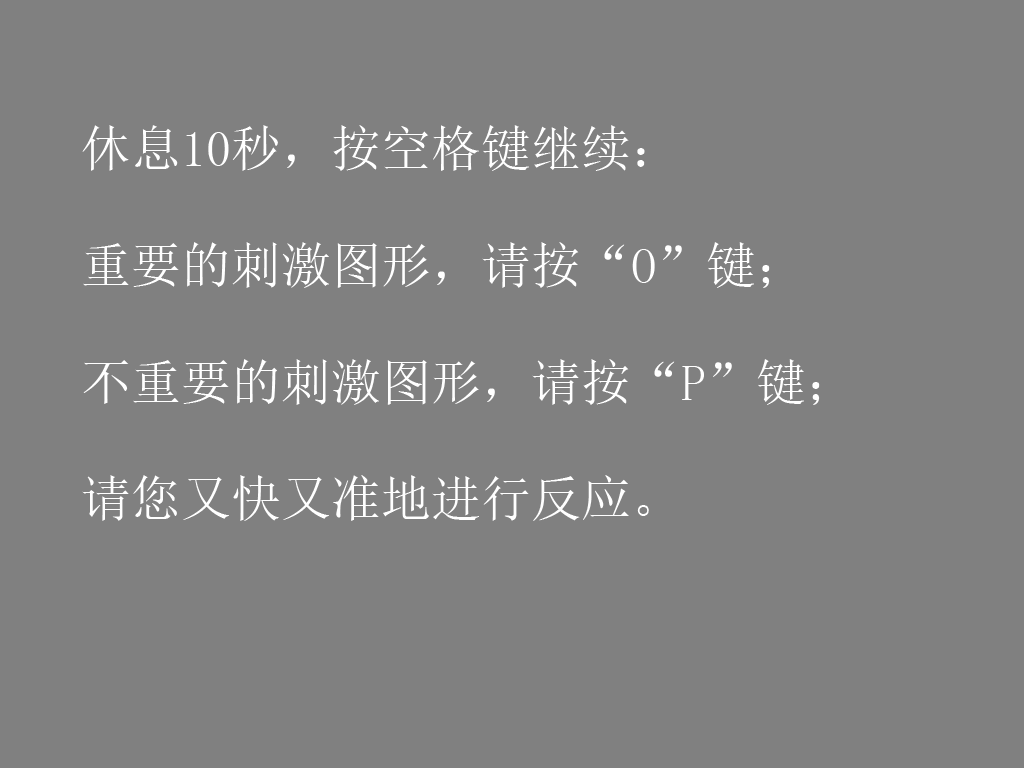
<style>
.page{position:relative;width:1024px;height:768px;background:#808080}
.page>*{position:absolute;margin:0}
.t1{font:50px/58.3px "SimSun";color:#ffffff}
</style>
<div class="page">
<p class="t1" style="left:82px;top:125px;width:738px;height:396px">休息10秒，按空格键继续：<br><br>重要的刺激图形，请按“O”键；<br><br>不重要的刺激图形，请按“P”键；<br><br>请您又快又准地进行反应。</p>
</div>
